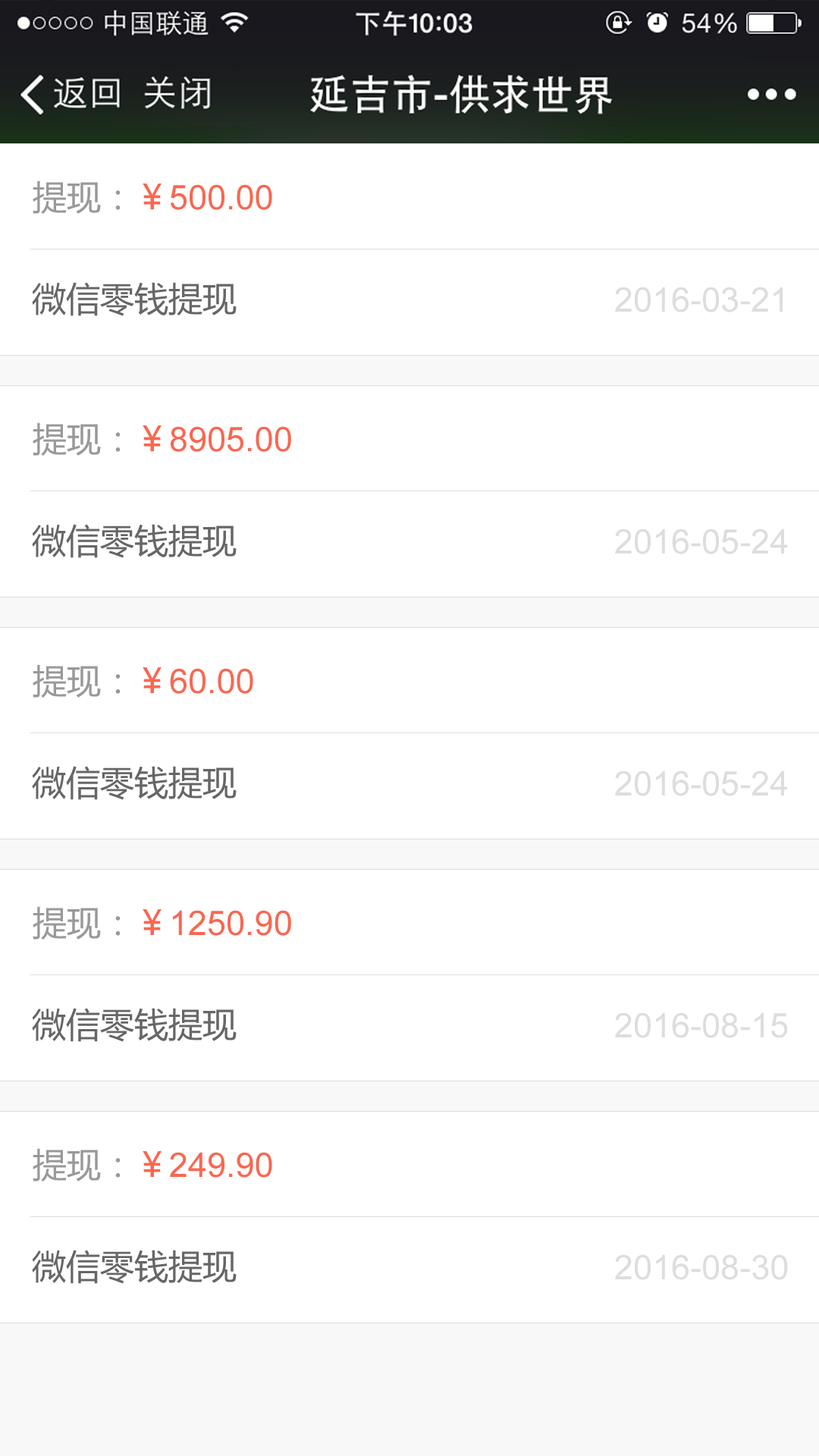
<style>
.page{position:relative;width:819px;height:1456px;background:#ffffff}
.page>*{position:absolute;margin:0}
.t1{font:34.1px "ArialMT";color:#f96751}
.t2{font:34.1px "MicrosoftYaHei";color:#999999}
.t3{font:34.1px "MicrosoftYaHei";color:#f96751}
.t4{font:34.1px "MicrosoftYaHei";color:#666666}
.t5{font:34.1px "ArialMT";color:#dddddd}
</style>
<div class="page">
<p class="t1" style="left:33px;top:180px;width:239px;height:34px"><span class="t2">提现：</span><span class="t3">￥</span>500.00</p>
<p class="t4" style="left:32px;top:282px;width:205px;height:34px">微信零钱提现</p>
<p class="t5" style="left:615px;top:287px;width:168px;height:25px">2016-03-21</p>
<p class="t1" style="left:33px;top:422px;width:258px;height:34px"><span class="t2">提现：</span><span class="t3">￥</span>8905.00</p>
<p class="t4" style="left:32px;top:524px;width:205px;height:34px">微信零钱提现</p>
<p class="t5" style="left:615px;top:529px;width:173px;height:25px">2016-05-24</p>
<p class="t1" style="left:33px;top:664px;width:220px;height:34px"><span class="t2">提现：</span><span class="t3">￥</span>60.00</p>
<p class="t4" style="left:32px;top:766px;width:205px;height:34px">微信零钱提现</p>
<p class="t5" style="left:615px;top:770px;width:173px;height:26px">2016-05-24</p>
<p class="t1" style="left:33px;top:906px;width:258px;height:34px"><span class="t2">提现：</span><span class="t3">￥</span>1250.90</p>
<p class="t4" style="left:32px;top:1008px;width:205px;height:34px">微信零钱提现</p>
<p class="t5" style="left:615px;top:1012px;width:173px;height:26px">2016-08-15</p>
<p class="t1" style="left:33px;top:1148px;width:239px;height:33px"><span class="t2">提现：</span><span class="t3">￥</span>249.90</p>
<p class="t4" style="left:32px;top:1250px;width:205px;height:34px">微信零钱提现</p>
<p class="t5" style="left:615px;top:1254px;width:173px;height:26px">2016-08-30</p>
</div>
